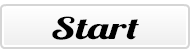
<style>
.page{position:relative;width:190px;height:49px}
.page>*{position:absolute;margin:0}
.t1{font:30px "Lobster1.4";color:#000000;scale:1.44 1}
</style>
<div class="page">
<p class="t1" style="left:52px;top:16px;width:87px;height:24px">Start</p>
</div>
